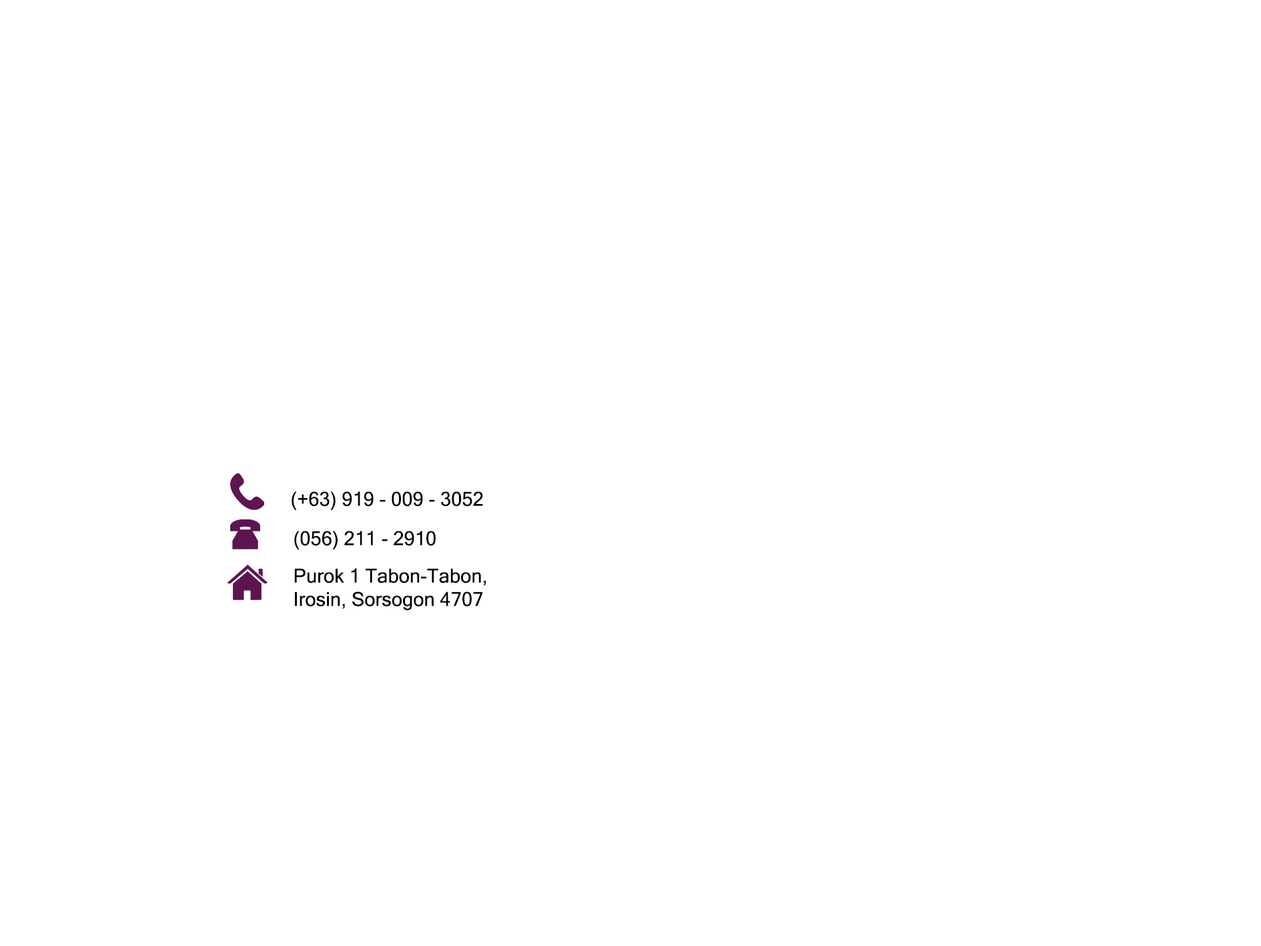
<style>
.page{position:relative;width:1261px;height:946px;background:#ffffff}
.page>*{position:absolute;margin:0}
.t1{font:19.5px "MicrosoftSansSerif";color:#000000}
</style>
<div class="page">
<p class="t1" style="left:292px;top:491px;width:191px;height:19px">(+63) 919 - 009 - 3052</p>
<p class="t1" style="left:294px;top:530px;width:142px;height:19px">(056) 211 - 2910</p>
<p class="t1" style="left:294px;top:568px;width:192px;height:42px">Purok 1 Tabon-Tabon,<br>Irosin, Sorsogon 4707</p>
</div>
